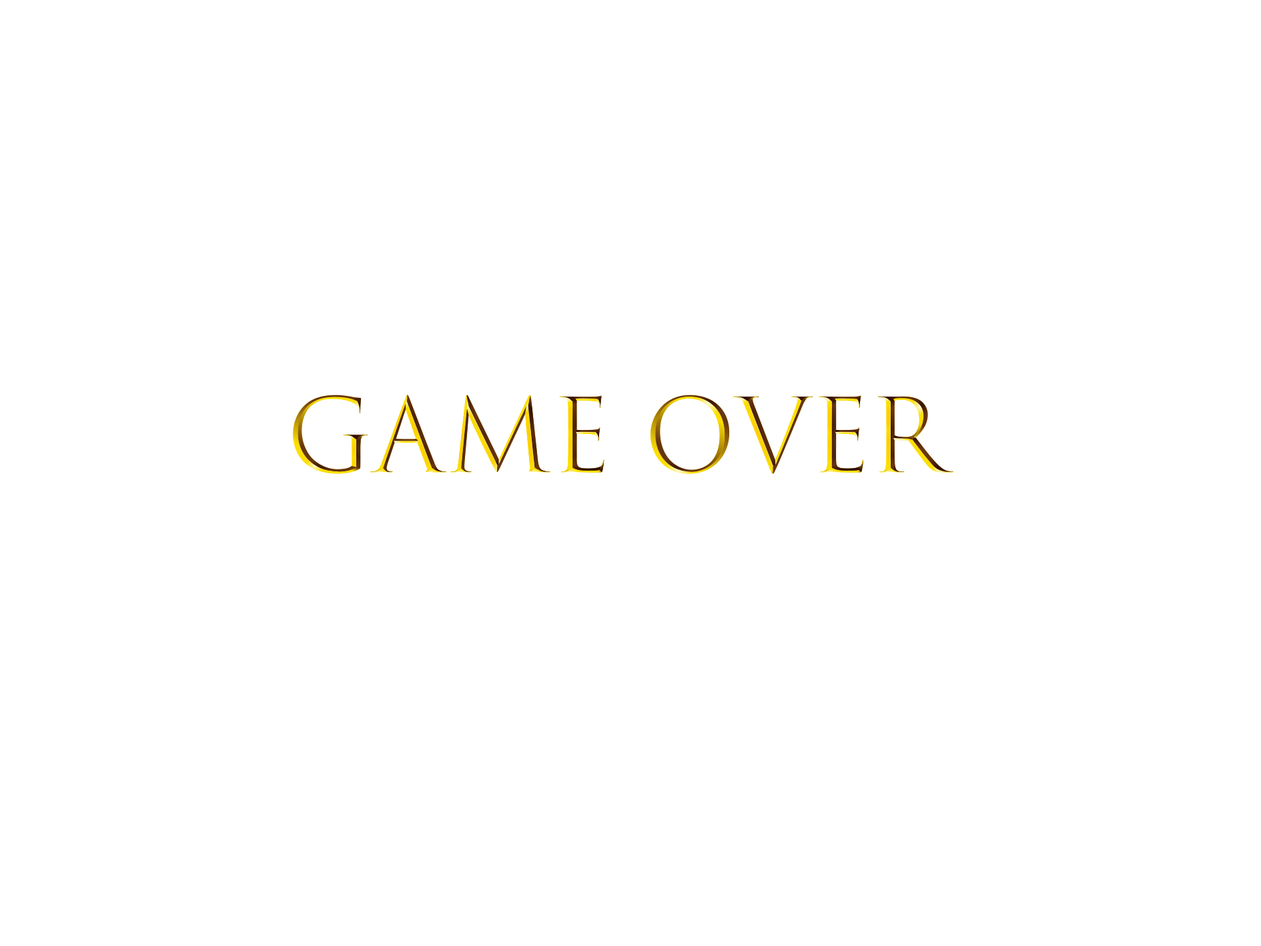
<style>
.page{position:relative;width:1261px;height:946px;background:#ffffff}
.page>*{position:absolute;margin:0}
.t1{font:100.1px "TrajanColor-Concept"}
.t2{font:100.1px "MyriadPro-Regular"}
</style>
<div class="page">
<p class="t1" style="left:293px;top:394px;width:661px;height:80px"><span class="t2">  </span>Game Over<br><br><span class="t2"><br>Game Over</span></p>
</div>
